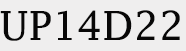
<style>
.page{position:relative;width:186px;height:51px;background:#efeeee}
.page>*{position:absolute;margin:0}
.t1{font:40px "LucidaFax";color:#080707}
</style>
<div class="page">
<p class="t1" style="left:0px;top:10px;width:180px;height:31px">UP14D22</p>
</div>
